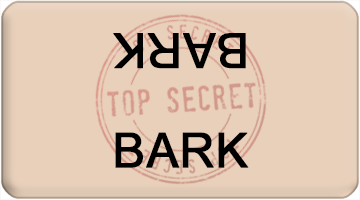
<style>
.page{position:relative;width:360px;height:200px;background:#e8d0bb}
.page>*{position:absolute;margin:0}
.t1{font:48px "ArialMT";color:#000000;font-weight:bold}
</style>
<div class="page">
<p class="t1" style="left:113px;top:33px;width:133px;height:36px;rotate:180deg">BARK</p>
<p class="t1" style="left:115px;top:132px;width:134px;height:36px">BARK</p>
</div>
